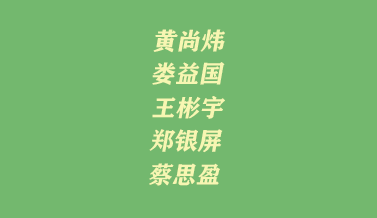
<style>
.page{position:relative;width:377px;height:218px;background:#73b86e}
.page>*{position:absolute;margin:0}
.t1{font:24px "FZCHSJW--GB1-0";color:#f7f6b2;font-style:italic}
</style>
<div class="page">
<p class="t1" style="left:153px;top:29px;width:72px;height:24px">黄尚炜</p>
<p class="t1" style="left:152px;top:62px;width:73px;height:23px">娄益国</p>
<p class="t1" style="left:152px;top:96px;width:73px;height:23px">王彬宇</p>
<p class="t1" style="left:149px;top:129px;width:74px;height:24px">郑银屏</p>
<p class="t1" style="left:149px;top:163px;width:71px;height:23px">蔡思盈</p>
</div>
